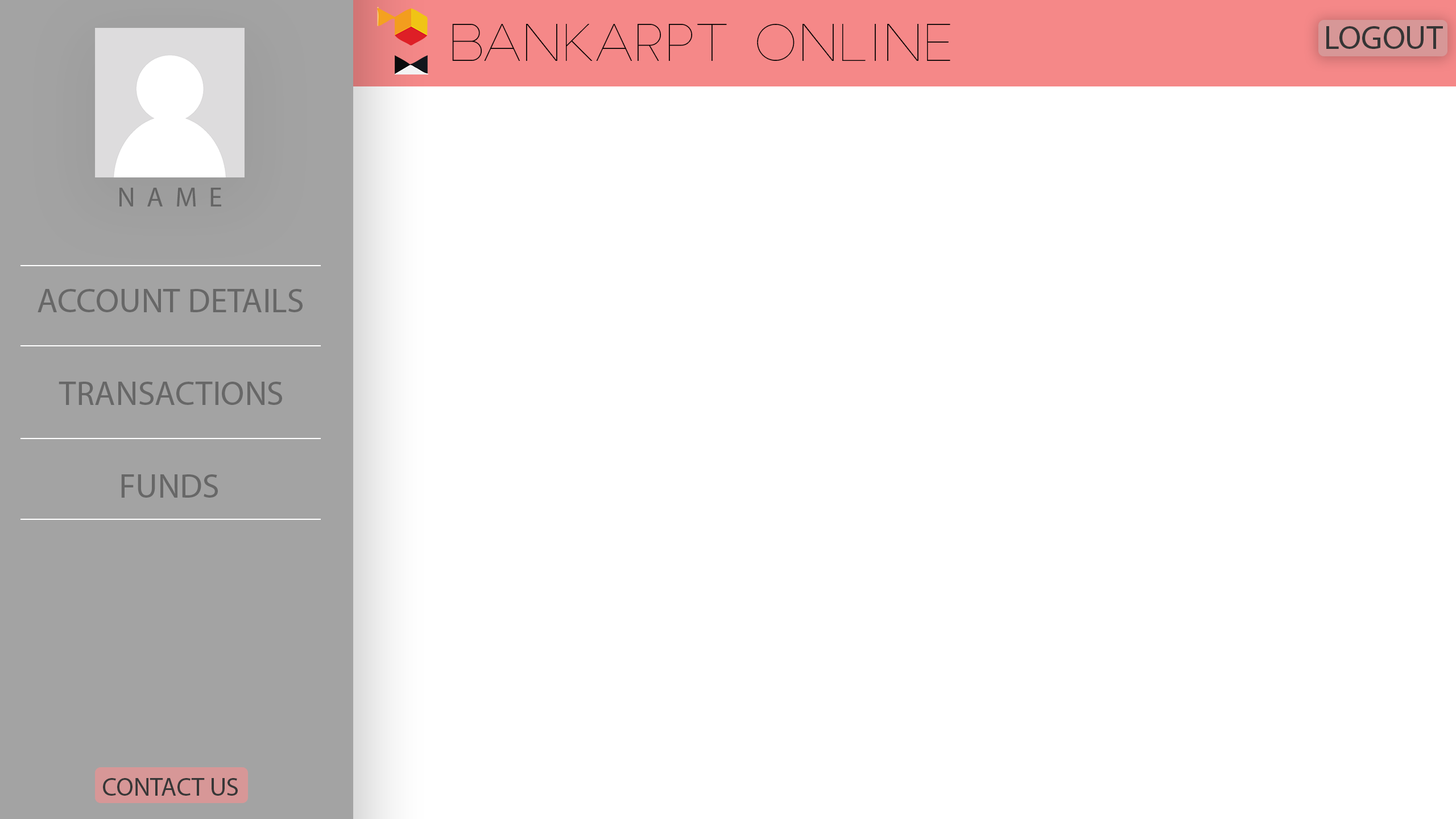
<style>
.page{position:relative;width:1456px;height:819px;background:#ffffff}
.page>*{position:absolute;margin:0}
.t1{font:49.3px "SlimJoe";color:#020202}
.t2{font:32.9px "MyriadPro-Regular";color:#353535}
.t3{font:27.3px "MyriadPro-Regular";color:#686868}
.t4{font:34.1px "MyriadPro-Regular";color:#676767}
.t5{font:25.5px "MyriadPro-Regular";color:#373737}
</style>
<div class="page">
<p class="t1" style="left:452px;top:24px;width:498px;height:37px">BANKARPT ONLINE</p>
<p class="t2" style="left:1326px;top:26px;width:117px;height:23px">LOGOUT</p>
<p class="t3" style="left:119px;top:188px;width:102px;height:18px">N  A  M  E</p>
<p class="t4" style="left:38px;top:289px;width:265px;height:23px">ACCOUNT DETAILS</p>
<p class="t4" style="left:59px;top:382px;width:223px;height:23px">TRANSACTIONS</p>
<p class="t4" style="left:121px;top:474px;width:97px;height:24px">FUNDS</p>
<p class="t5" style="left:103px;top:778px;width:135px;height:18px">CONTACT US</p>
</div>
